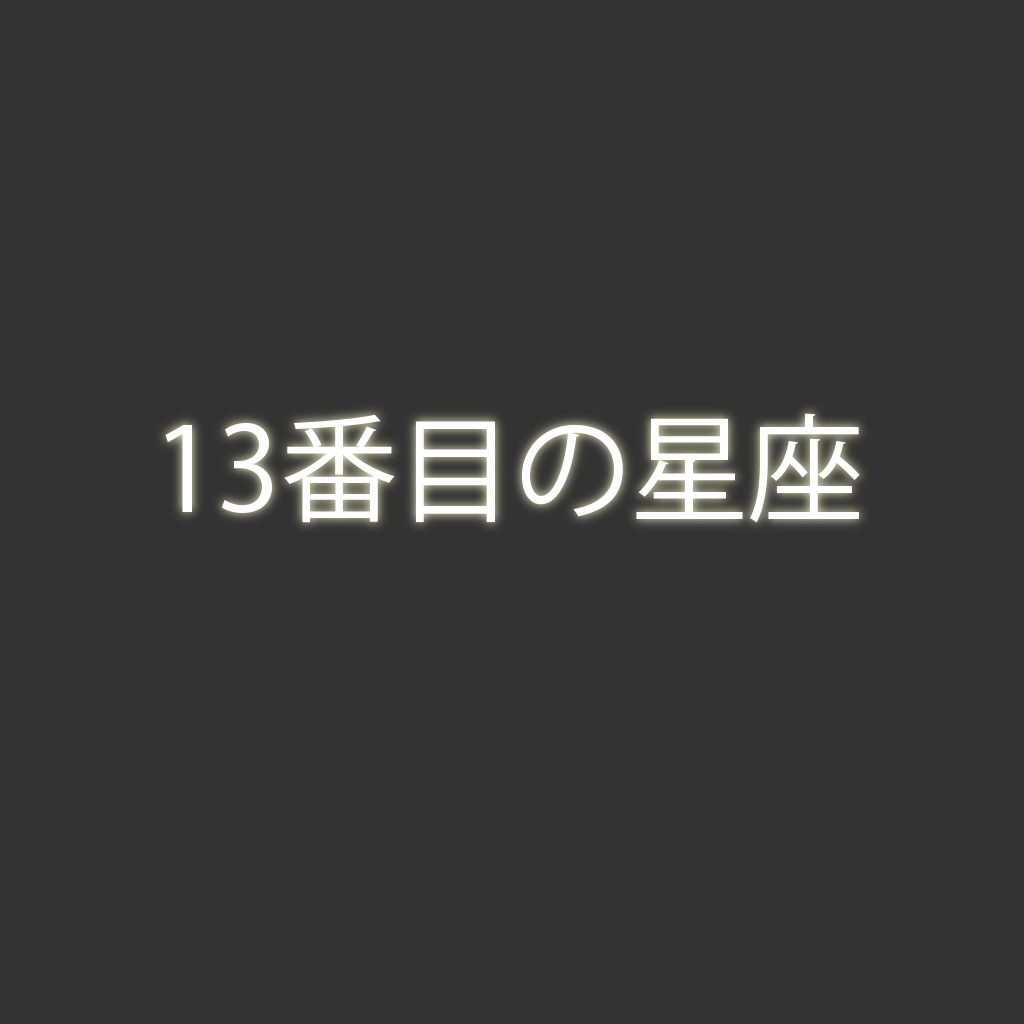
<style>
.page{position:relative;width:1024px;height:1024px;background:#333333}
.page>*{position:absolute;margin:0}
.t1{font:116.7px "KozGoPr6N-Regular";color:#fefefe}
</style>
<div class="page">
<p class="t1" style="left:165px;top:413px;width:695px;height:110px">13番目の星座</p>
</div>
